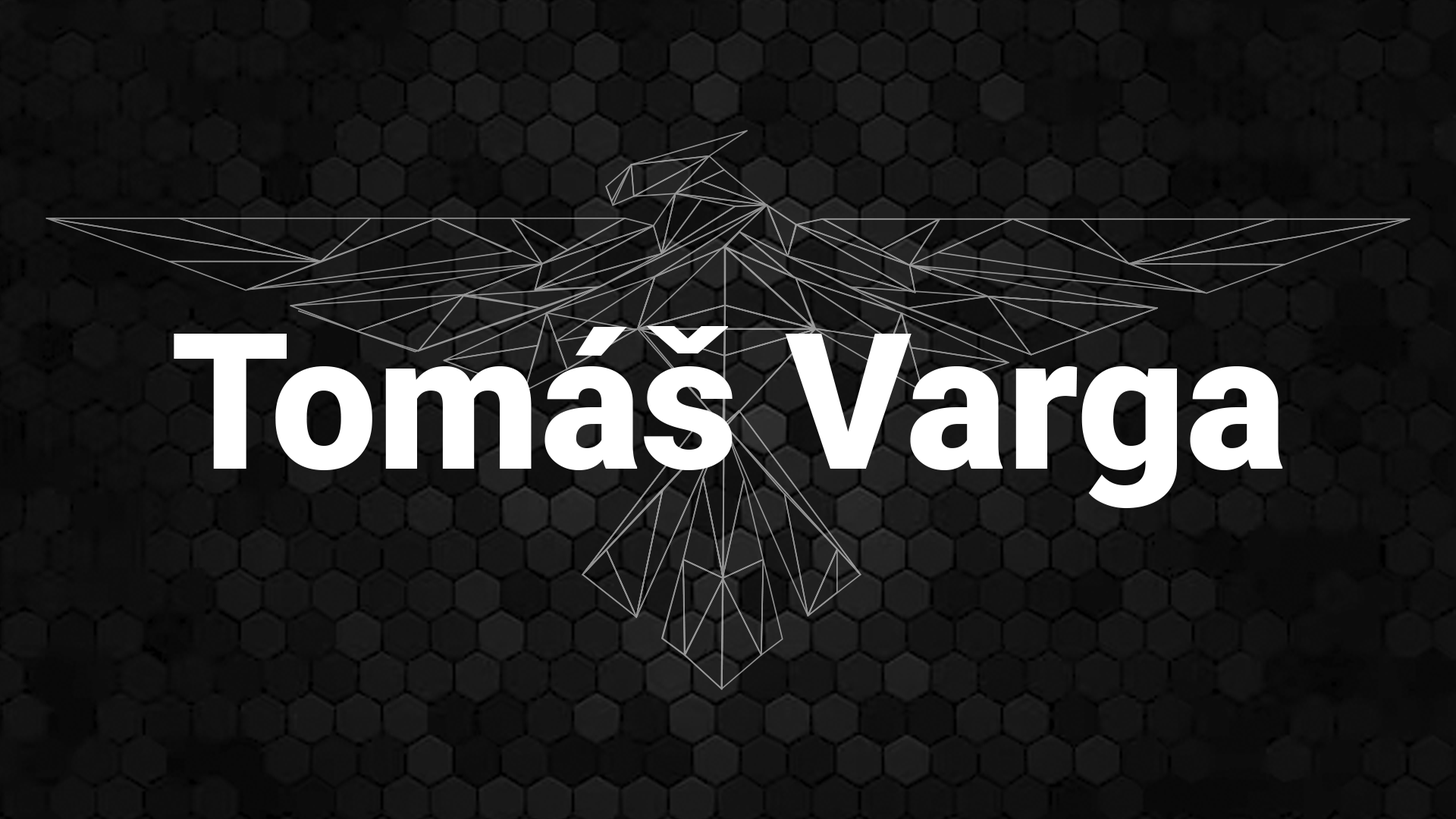
<style>
.page{position:relative;width:1456px;height:819px}
.page>*{position:absolute;margin:0}
.t1{font:189.6px "Roboto-Black";color:#ffffff}
</style>
<div class="page">
<p class="t1" style="left:174px;top:326px;width:1109px;height:182px">Tomáš Varga</p>
</div>
